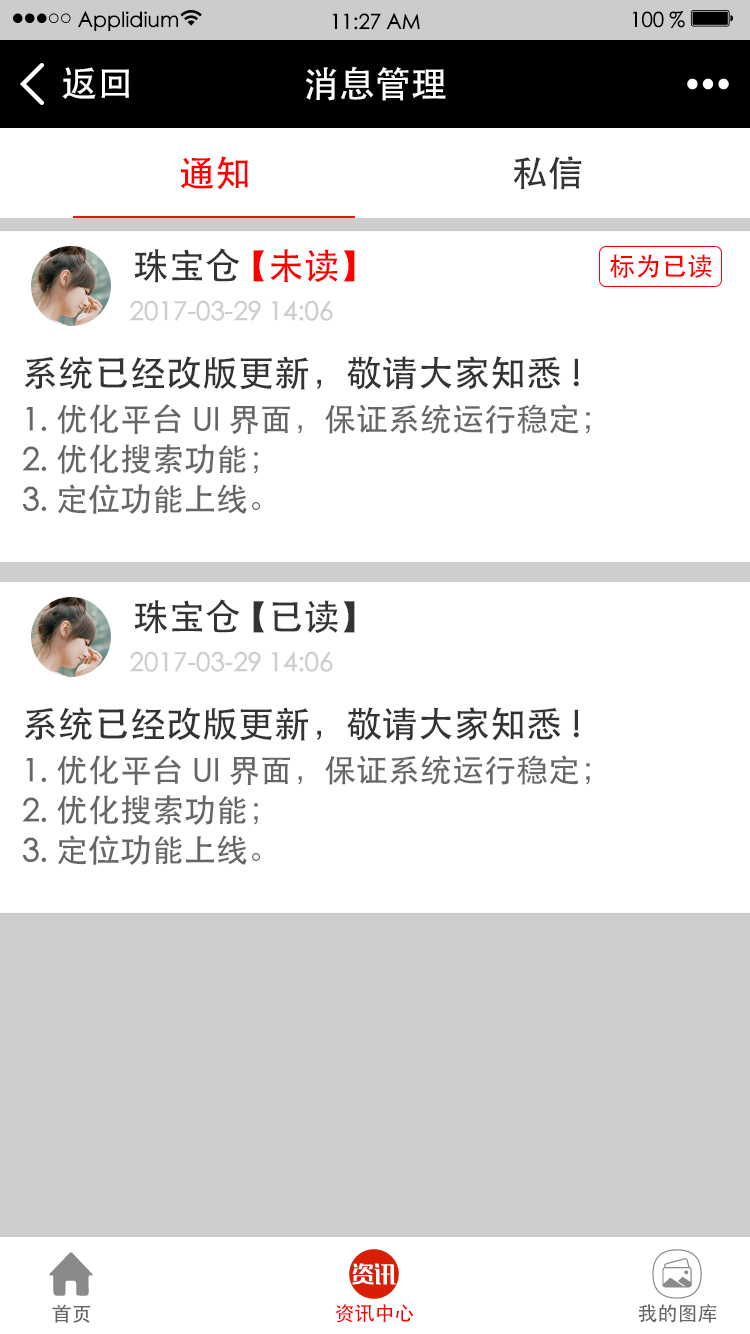
<style>
.page{position:relative;width:750px;height:1334px;background:#ffffff}
.page>*{position:absolute;margin:0}
.t1{font:20.9px "STHeiti";color:#000000}
.t2{font:36px "STHeiti";color:#ffffff}
.t3{font:36px "STHeiti";color:#ff0000}
.t4{font:36px "STHeiti";color:#333333}
.t5{font:26px "STHeiti";color:#ff0000}
.t6{font:26px "STHeiti";color:#cdcdcd}
.t7{font:32px/40px "STHeiti";color:#666666}
.t8{font:36px/48px "STHeiti";color:#333333}
.t9{font:20px "STHeiti";color:#666666}
.t10{font:20px "STHeiti";color:#ff0000}
</style>
<div class="page">
<p class="t1" style="left:78px;top:11px;width:100px;height:20px">Applidium</p>
<p class="t1" style="left:332px;top:13px;width:88px;height:17px">11:27 AM</p>
<p class="t1" style="left:632px;top:11px;width:53px;height:17px">100 %</p>
<p class="t2" style="left:62px;top:67px;width:67px;height:32px">返回</p>
<p class="t2" style="left:306px;top:66px;width:140px;height:35px">消息管理</p>
<p class="t3" style="left:180px;top:156px;width:68px;height:34px">通知</p>
<p class="t4" style="left:513px;top:156px;width:69px;height:34px">私信</p>
<p class="t3" style="left:134px;top:248px;width:221px;height:35px"><span class="t4">珠宝仓 </span>【未读】</p>
<p class="t5" style="left:610px;top:254px;width:102px;height:24px">标为已读</p>
<p class="t6" style="left:129px;top:300px;width:204px;height:21px">2017-03-29 14:06</p>
<p class="t7" style="left:22px;top:356px;width:568px;height:158px"><span class="t8">系统已经改版更新，敬请大家知悉!<br></span>1.优化平台UI界面，保证系统运行稳定；<br>2.优化搜索功能；<br>3.定位功能上线。</p>
<p class="t4" style="left:134px;top:599px;width:221px;height:35px">珠宝仓 【已读】</p>
<p class="t6" style="left:129px;top:651px;width:204px;height:21px">2017-03-29 14:06</p>
<p class="t7" style="left:22px;top:707px;width:568px;height:158px"><span class="t8">系统已经改版更新，敬请大家知悉!<br></span>1.优化平台UI界面，保证系统运行稳定；<br>2.优化搜索功能；<br>3.定位功能上线。</p>
<p class="t9" style="left:52px;top:1304px;width:39px;height:19px">首页</p>
<p class="t10" style="left:335px;top:1304px;width:79px;height:19px">资讯中心</p>
<p class="t9" style="left:638px;top:1304px;width:79px;height:19px">我的图库</p>
</div>
